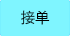
<style>
.page{position:relative;width:70px;height:36px;background:#7ff5ff}
.page>*{position:absolute;margin:0}
.t1{font:15px "STXihei";letter-spacing:-0.045em;color:#000000}
</style>
<div class="page">
<p class="t1" style="left:21px;top:10px;width:29px;height:15px">接单</p>
</div>
